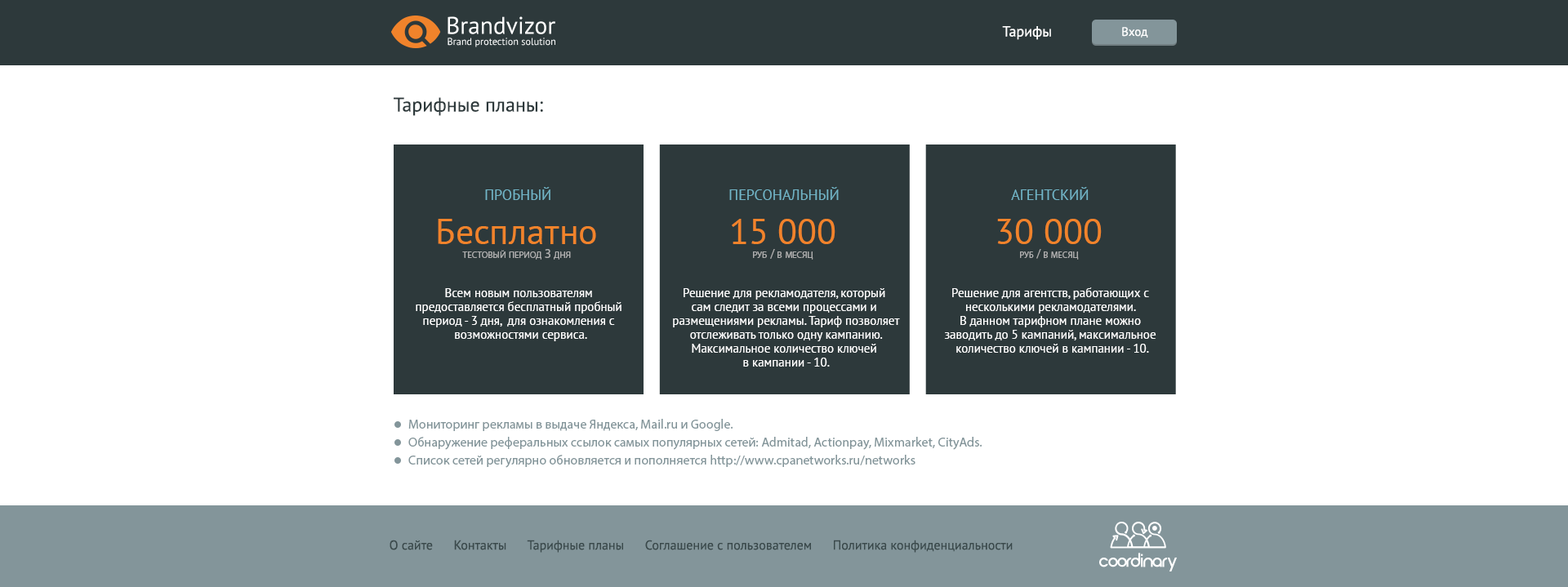
<style>
.page{position:relative;width:1568px;height:587px;background:#ffffff}
.page>*{position:absolute;margin:0}
.t1{font:14.7px "PTSans-Regular";color:#ffffff}
.t2{font:12.2px "PTSans-Regular";color:#ffffff}
.t3{font:19.6px "PTSans-Regular";color:#2d393b}
.t4{font:14.7px "PTSans-Regular";color:#72b5c7;text-transform:uppercase}
.t5{font:13.1px/14px "MyriadPro-Regular";color:#adadad;font-variant:small-caps}
.t6{font:35.9px/14px "PTSans-Regular";color:#f1832b}
.t7{font:35.9px/14px "PTSans-Regular";color:#f1832b;text-transform:uppercase}
.t8{font:12.7px/14px "MyriadPro-Regular";color:#adadad;font-variant:small-caps}
.t9{font:12.2px/14px "PTSans-Regular";color:#ffffff}
.t10{font:13.1px/18px "MyriadPro-Regular";color:#83959a}
.t11{font:13.1px "PTSans-Regular";color:#3a494b}
</style>
<div class="page">
<p class="t1" style="left:1002px;top:26px;width:49px;height:14px">Тарифы</p>
<p class="t2" style="left:1122px;top:27px;width:26px;height:11px">Вход</p>
<p class="t3" style="left:394px;top:97px;width:149px;height:19px">Тарифные планы:</p>
<p class="t4" style="left:485px;top:187px;width:65px;height:13px">ПРОБНЫЙ</p>
<p class="t4" style="left:729px;top:187px;width:110px;height:13px">ПЕРСОНАЛЬНЫЙ</p>
<p class="t4" style="left:1011px;top:187px;width:78px;height:13px">АГЕНТСКИЙ</p>
<p class="t5" style="left:438px;top:219px;width:158px;height:41px;text-align:center"><span class="t6">Бесплатно<br></span>тестовый период 3 дня</p>
<p class="t5" style="left:732px;top:219px;width:103px;height:41px;text-align:center"><span class="t7">15 000<br></span>руб / в месяц</p>
<p class="t8" style="left:997px;top:219px;width:105px;height:41px;text-align:center"><span class="t7">30 000<br></span>руб / в месяц</p>
<p class="t9" style="left:416px;top:288px;width:205px;height:53px;text-align:center">Всем новым пользователям <br>предоставляется бесплатный пробный <br>период - 3 дня,  для ознакомления с <br>возможностями сервиса.</p>
<p class="t9" style="left:673px;top:288px;width:227px;height:79px;text-align:center">Решение для рекламодателя, который <br>сам следит за всеми процессами и <br>размещениями рекламы. Тариф позволяет<br>отслеживать только одну кампанию.<br>Максимальное количество ключей <br>в кампании - 10.</p>
<p class="t9" style="left:944px;top:287px;width:212px;height:66px;text-align:center">Решение для агентств, работающих с <br>несколькими рекламодателями. <br>В данном тарифном плане можно <br>заводить до 5 кампаний, максимальное <br>количество ключей в кампании - 10.</p>
<p class="t10" style="left:408px;top:419px;width:574px;height:49px">Мониторинг рекламы в выдаче Яндекса, Mail.ru и Google.<br>Обнаружение реферальных ссылок самых популярных сетей: Admitad, Actionpay, Mixmarket, CityAds.<br>Список сетей регулярно обновляется и пополняется http://www.cpanetworks.ru/networks</p>
<p class="t11" style="left:390px;top:540px;width:623px;height:13px">О сайте      Контакты      Тарифные планы      Соглашение с пользователем      Политика конфиденциальности</p>
</div>
